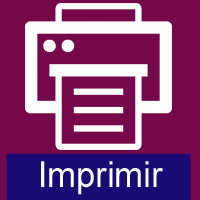
<style>
.page{position:relative;width:200px;height:200px;background:#75074a}
.page>*{position:absolute;margin:0}
.t1{font:36px "ArialMT";color:#ffffff;scale:0.96 1}
</style>
<div class="page">
<p class="t1" style="left:41px;top:161px;width:122px;height:34px">Imprimir</p>
</div>
